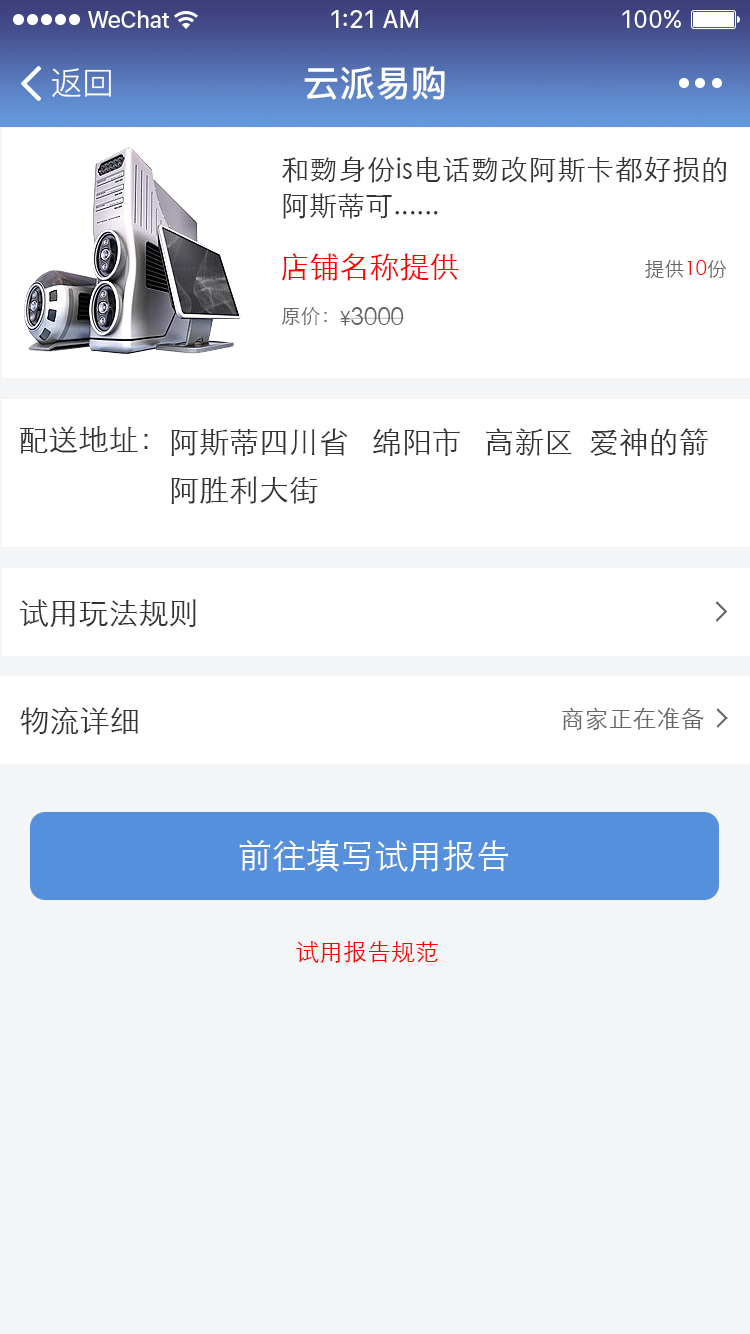
<style>
.page{position:relative;width:750px;height:1334px;background:#f4f5f6}
.page>*{position:absolute;margin:0}
.t1{font:32px "PingFang-SC-Regular";color:#ffffff}
.t2{font:36px "PingFang-SC-Bold";color:#ffffff}
.t3{font:28px/36px "STXihei";color:#333333}
.t4{font:30px "STXihei";color:#ff0000}
.t5{font:20px "STXihei";color:#666666}
.t6{font:20px "STXihei";color:#ff0000}
.t7{font:24px "STXihei";color:#666666}
.t8{font:30px "STXihei";color:#333333}
.t9{font:30px/48px "STXihei";color:#333333}
.t10{font:34px "STXihei";color:#ffffff}
.t11{font:24px "STXihei";color:#fe0000}
</style>
<div class="page">
<p class="t1" style="left:52px;top:68px;width:59px;height:29px">返回</p>
<p class="t2" style="left:304px;top:66px;width:141px;height:34px">云派易购</p>
<p class="t3" style="left:282px;top:156px;width:445px;height:63px;text-align:justify">和覅身份is电话覅改阿斯卡都好损的阿斯蒂可......</p>
<p class="t4" style="left:281px;top:253px;width:178px;height:28px">店铺名称提供</p>
<p class="t5" style="left:645px;top:260px;width:82px;height:19px">提供<span class="t6">10</span>份</p>
<p class="t5" style="left:281px;top:307px;width:46px;height:19px">原价：</p>
<p class="t7" style="left:339px;top:307px;width:65px;height:19px"><span class="t5">¥</span>3000</p>
<p class="t8" style="left:20px;top:426px;width:128px;height:28px">配送地址：</p>
<p class="t9" style="left:171px;top:428px;width:537px;height:76px">阿斯蒂四川省   绵阳市   高新区  爱神的箭阿胜利大街</p>
<p class="t8" style="left:20px;top:599px;width:176px;height:28px">试用玩法规则</p>
<p class="t8" style="left:20px;top:707px;width:118px;height:28px">物流详细</p>
<p class="t7" style="left:562px;top:707px;width:142px;height:23px">商家正在准备</p>
<p class="t10" style="left:239px;top:840px;width:269px;height:32px">前往填写试用报告</p>
<p class="t11" style="left:296px;top:941px;width:142px;height:22px">试用报告规范</p>
</div>
